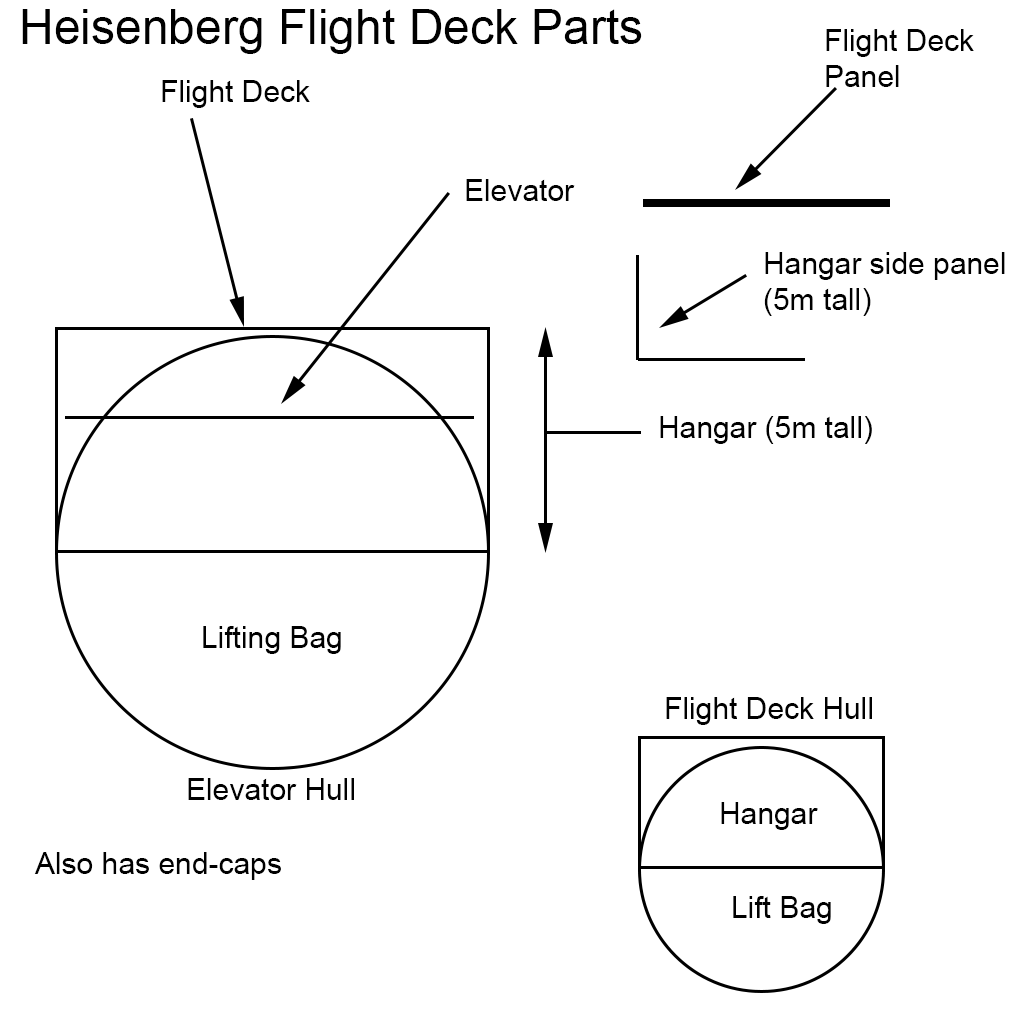
<style>
.page{position:relative;width:1024px;height:1024px;background:#ffffff}
.page>*{position:absolute;margin:0}
.t1{font:48px "ArialMT";color:#000000}
.t2{font:30px "ArialMT";color:#000000}
</style>
<div class="page">
<p class="t1" style="left:22px;top:9px;width:620px;height:45px">Heisenberg Flight Deck Parts</p>
<p class="t2" style="left:826px;top:29px;width:148px;height:58px">Flight Deck<br>Panel</p>
<p class="t2" style="left:162px;top:80px;width:148px;height:28px">Flight Deck</p>
<p class="t2" style="left:466px;top:179px;width:109px;height:22px">Elevator</p>
<p class="t2" style="left:764px;top:252px;width:241px;height:64px">Hangar side panel<br>(5m tall)</p>
<p class="t2" style="left:660px;top:416px;width:212px;height:28px">Hangar (5m tall)</p>
<p class="t2" style="left:203px;top:626px;width:138px;height:28px">Lifting Bag</p>
<p class="t2" style="left:666px;top:697px;width:206px;height:28px">Flight Deck Hull</p>
<p class="t2" style="left:188px;top:778px;width:166px;height:22px">Elevator Hull</p>
<p class="t2" style="left:721px;top:802px;width:97px;height:28px">Hangar</p>
<p class="t2" style="left:34px;top:852px;width:247px;height:28px">Also has end-caps</p>
<p class="t2" style="left:733px;top:896px;width:98px;height:28px">Lift Bag</p>
</div>
